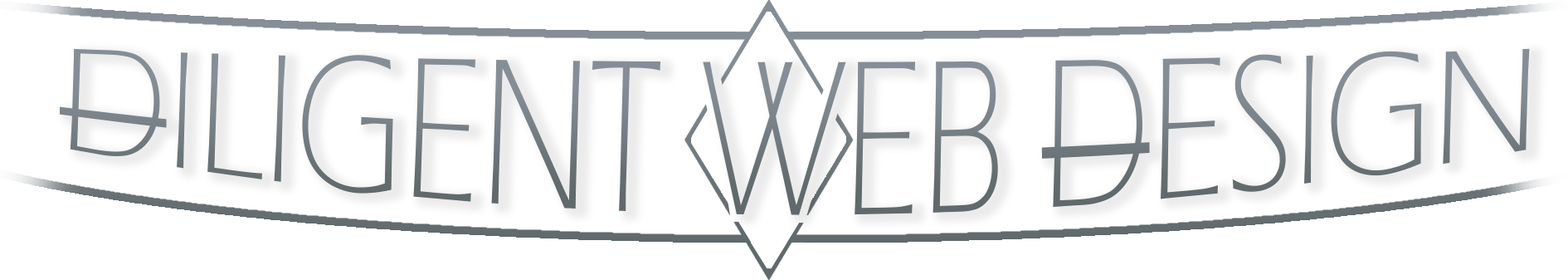
<style>
.page{position:relative;width:1568px;height:280px;background:#ffffff}
.page>*{position:absolute;margin:0}
.t1{font:148.6px "ErasITC-Light";color:#60696b;text-transform:uppercase}
.t2{font:148.6px "ErasITC-Light";color:#858e96;text-transform:uppercase}
</style>
<div class="page">
<p class="t1" style="left:60px;top:48px;width:1470px;height:167px"><span class="t2">Diligent </span>Web Design</p>
</div>
